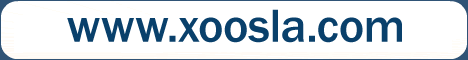
<style>
.page{position:relative;width:468px;height:60px;background:#ffffff}
.page>*{position:absolute;margin:0}
.t1{font:48px "FranklinGothic-Medium";color:#09406b}
</style>
<div class="page">
<p class="t1" style="left:67px;top:9px;width:335px;height:34px">www.xoosla.com</p>
</div>
